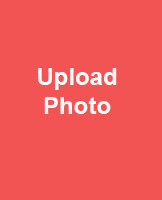
<style>
.page{position:relative;width:162px;height:200px;background:#f25353}
.page>*{position:absolute;margin:0}
.t1{font:24px "Arial-BoldMT";color:#fefafa}
</style>
<div class="page">
<p class="t1" style="left:38px;top:68px;width:79px;height:46px;text-align:center">Upload<br>Photo</p>
</div>
